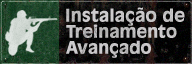
<style>
.page{position:relative;width:192px;height:64px}
.page>*{position:absolute;margin:0}
.t1{font:17px "Incised901BT-Bold";color:#c9cbcb;font-weight:bold}
.t2{font:16.7px "Incised901BT-Bold";color:#c4c4c3;font-weight:bold}
.t3{font:16.7px "Incised901BT-Bold";color:#b1b1b0;font-weight:bold}
</style>
<div class="page">
<p class="t1" style="left:66px;top:7px;width:119px;height:19px">Instalação de</p>
<p class="t2" style="left:66px;top:24px;width:111px;height:14px">Treinamento</p>
<p class="t3" style="left:66px;top:40px;width:85px;height:18px">Avançado</p>
</div>
